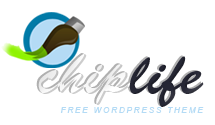
<style>
.page{position:relative;width:215px;height:125px;background:#ffffff}
.page>*{position:absolute;margin:0}
.t1{font:58.3px "BrushScriptStd";color:#ffffff}
.t2{font:58.3px "BrushScriptStd";color:#272836}
.t3{font:8.3px "Arial-ItalicMT";letter-spacing:0.2em;color:#b4dbf5}
</style>
<div class="page">
<p class="t1" style="left:38px;top:54px;width:166px;height:53px">chip<span class="t2">life</span></p>
<p class="t3" style="left:60px;top:107px;width:144px;height:7px">FREE WORDPRESS THEME</p>
</div>
